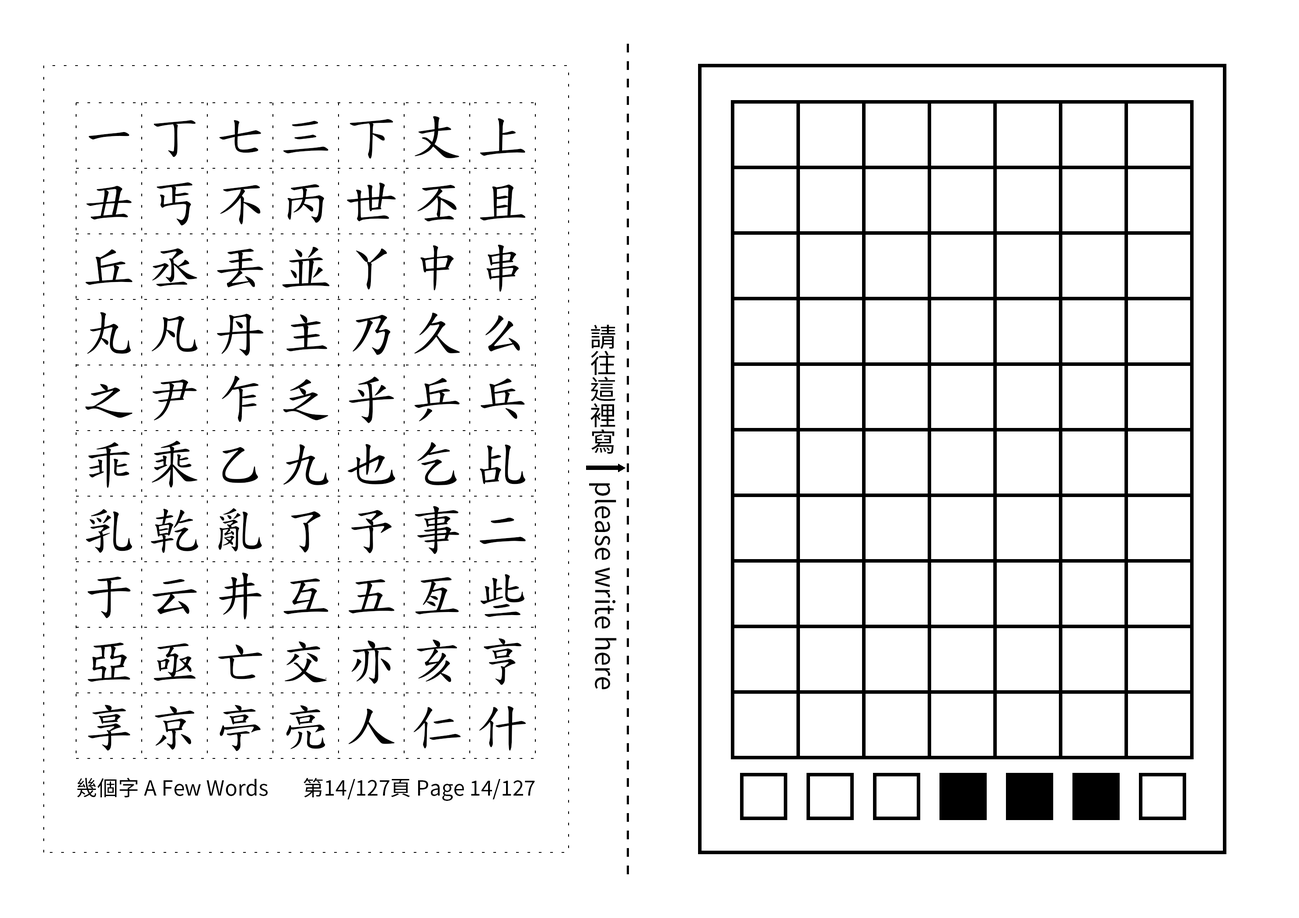
<style>
.page{position:relative;width:1299px;height:918px;background:#ffffff}
.page>*{position:absolute;margin:0}
.t1{font:52.5px/65.6px "TW-Kai-98_1";letter-spacing:0.25em;color:#000000}
.t2{font:26.2px "SourceHanSansTC-Regular";color:#000000}
.t3{font:21px "SourceHanSansTC-Regular";color:#000000}
</style>
<div class="page">
<p class="t1" style="left:85px;top:116px;width:441px;height:636px;text-align:center">一丁七三下丈上丑丐不丙世丕且丘丞丟並丫中串丸凡丹主乃久么之尹乍乏乎乒乓乖乘乙九也乞乩乳乾亂了予事二于云井互五亙些亞亟亡交亦亥亨享京亭亮人仁什</p>
<p class="t2" style="left:589px;top:324px;width:28px;height:366px;text-align:center">請往這裡寫　please write here</p>
<p class="t3" style="left:77px;top:778px;width:191px;height:20px">幾個字 A Few Words</p>
<p class="t3" style="left:303px;top:778px;width:232px;height:23px">第14/127頁 Page 14/127</p>
</div>
